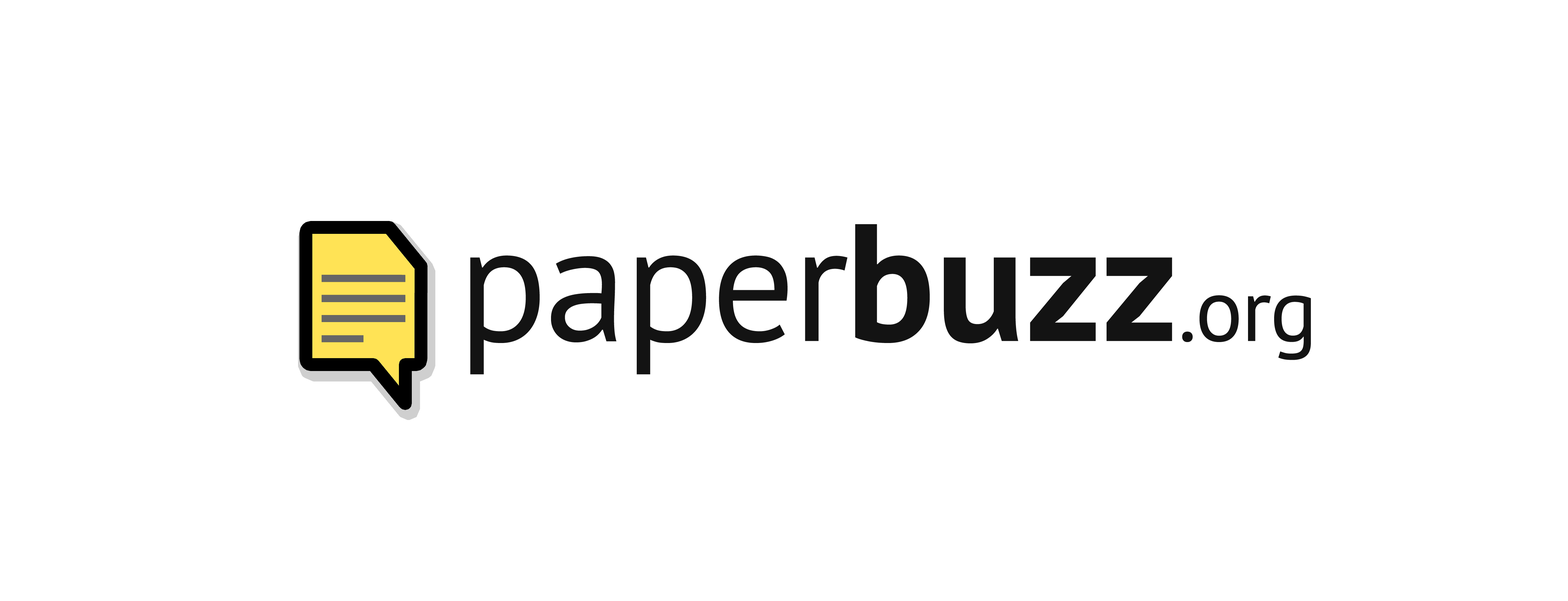
<style>
.page{position:relative;width:1568px;height:601px;background:#ffffff}
.page>*{position:absolute;margin:0}
.t1{font:166.9px "PTSans-Regular";letter-spacing:-0.02em;color:#131313}
.t2{font:166.9px "PTSans-Bold";color:#131313}
.t3{font:89.2px "PTSans-Regular";letter-spacing:-0.02em;color:#131313}
</style>
<div class="page">
<p class="t1" style="left:470px;top:224px;width:841px;height:151px">paper<span class="t2">buzz</span><span class="t3">.org</span></p>
</div>
